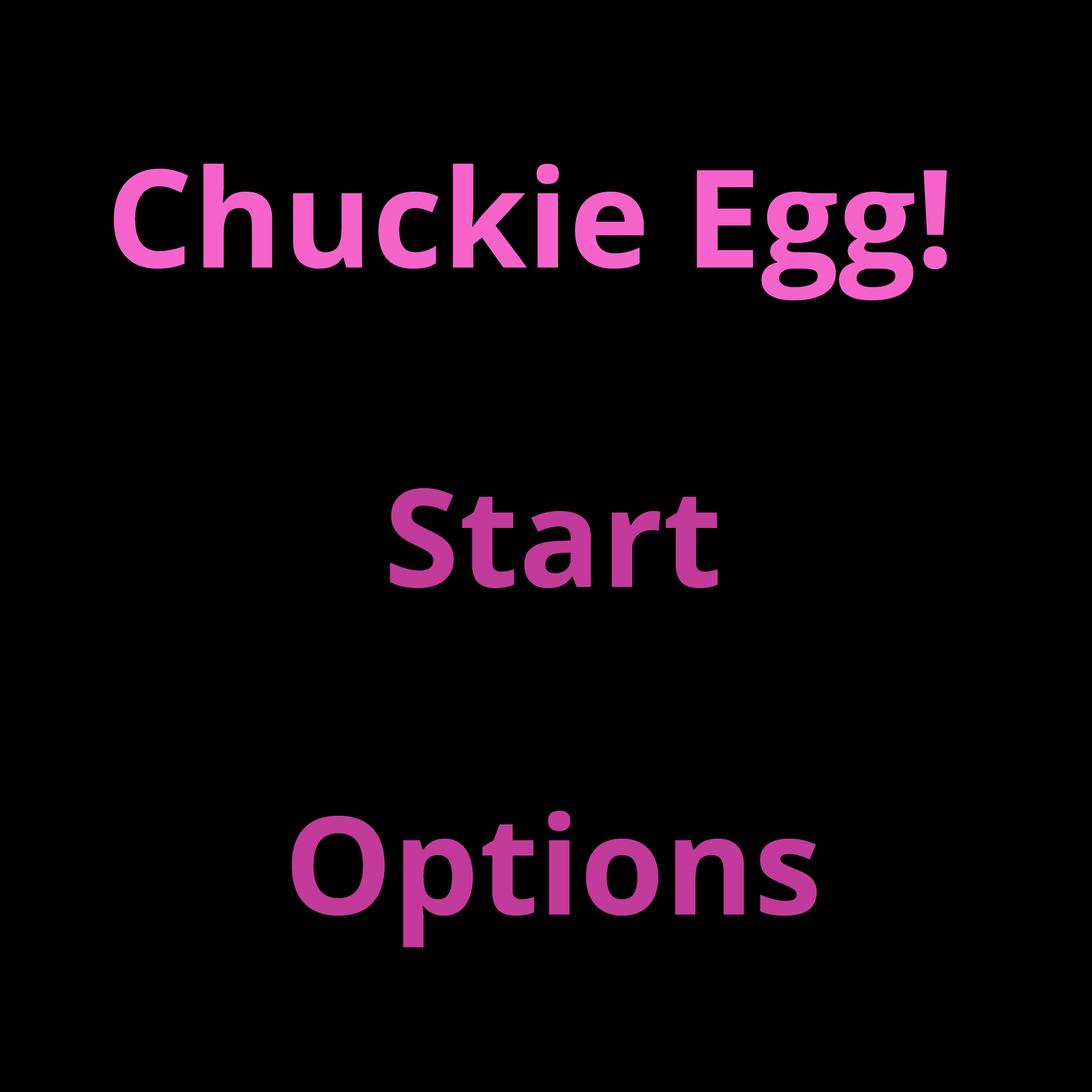
<style>
.page{position:relative;width:1092px;height:1092px;background:#000000}
.page>*{position:absolute;margin:0}
.t1{font:136.5px "OpenSans-Bold";color:#f663cb}
.t2{font:136.5px "OpenSans-Bold";color:#c23a9a}
</style>
<div class="page">
<p class="t1" style="left:114px;top:163px;width:833px;height:137px">Chuckie Egg!</p>
<p class="t2" style="left:292px;top:488px;width:525px;height:459px;text-align:center">Start<br><br>Options</p>
</div>
